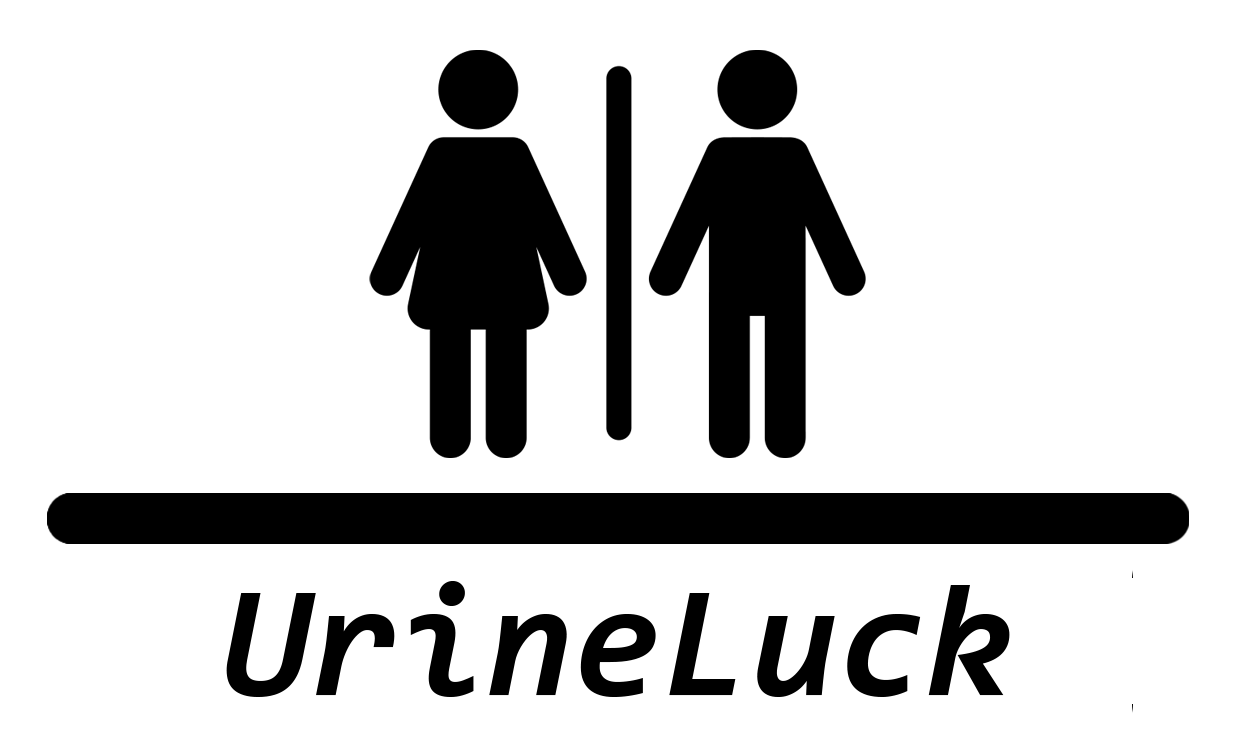
<style>
.page{position:relative;width:1236px;height:756px;background:#ffffff}
.page>*{position:absolute;margin:0}
.t1{font:160px "Consolas-BoldItalic";color:#000000}
</style>
<div class="page">
<p class="t1" style="left:226px;top:581px;width:784px;height:116px">UrineLuck</p>
</div>
